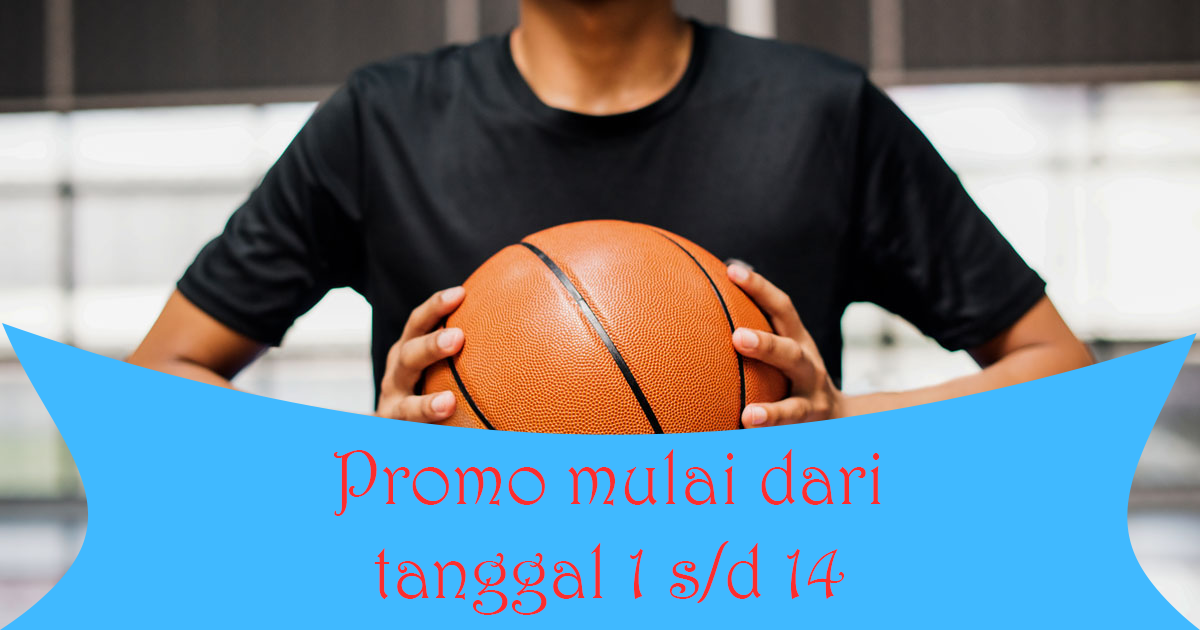
<style>
.page{position:relative;width:1200px;height:630px;background:#40b9ff}
.page>*{position:absolute;margin:0}
.t1{font:77.7px "Harrington";color:#fc2d2d;scale:0.94 1}
</style>
<div class="page">
<p class="t1" style="left:333px;top:449px;width:548px;height:166px;text-align:center">Promo mulai dari tanggal 1 s/d 14</p>
</div>
